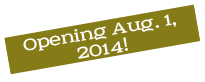
<style>
.page{position:relative;width:205px;height:82px;background:#ffffff}
.page>*{position:absolute;margin:0}
.t1{font:18px "Sreda";color:#ffffff}
</style>
<div class="page">
<p class="t1" style="left:23px;top:14px;width:153px;height:45px;rotate:-10deg">Opening Aug. 1, 2014!</p>
</div>
